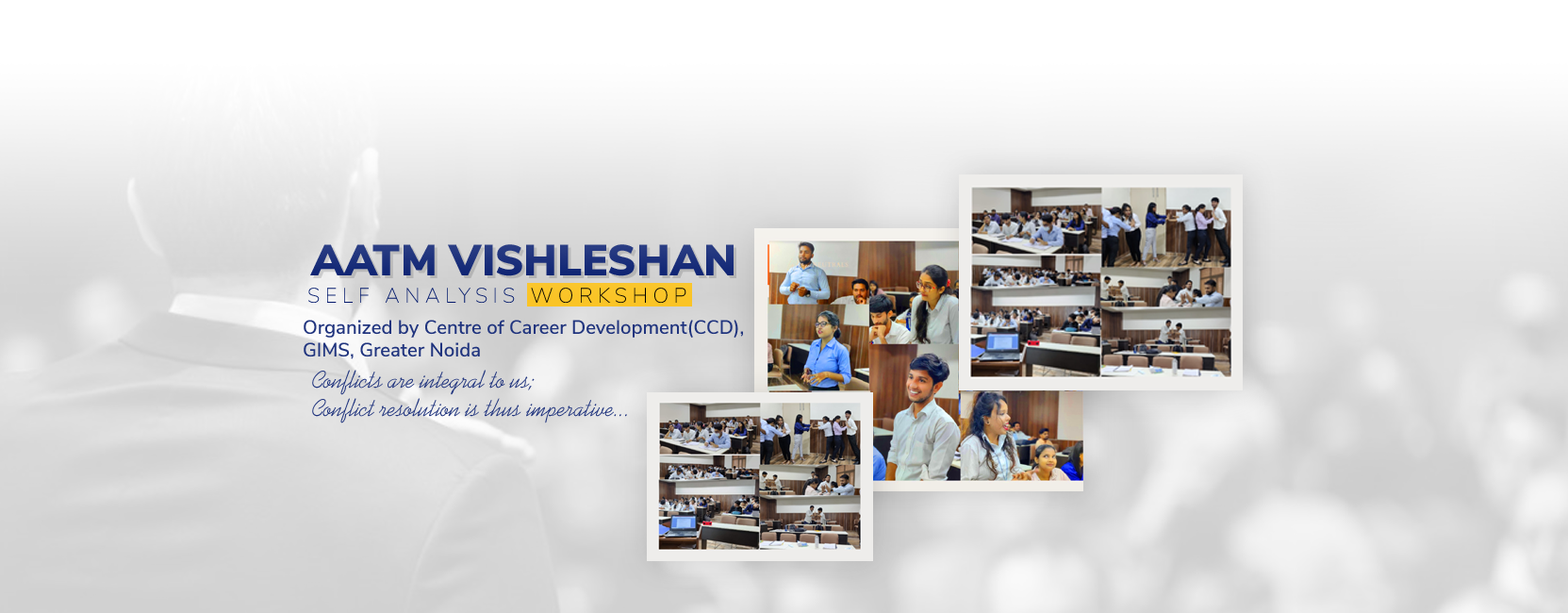
<style>
.page{position:relative;width:1568px;height:613px}
.page>*{position:absolute;margin:0}
.t1{font:43.4px "NunitoSans-Black";color:#1c307b;text-transform:uppercase}
.t2{font:20.9px "NunitoSans-ExtraLight";letter-spacing:0.24em;color:#00176b;text-transform:uppercase}
.t3{font:20.9px "NunitoSans-ExtraLight";letter-spacing:0.24em;color:#000000;text-transform:uppercase}
.t4{font:19.2px "NunitoSans-SemiBold";color:#20347e}
.t5{font:24.1px "KaufmannBT-Regular";color:#20347e}
</style>
<div class="page">
<p class="t1" style="left:310px;top:244px;width:424px;height:32px">Aatm Vishleshan</p>
<p class="t2" style="left:308px;top:288px;width:378px;height:16px">Self Analysis <span class="t3">workshop</span></p>
<p class="t4" style="left:304px;top:320px;width:439px;height:39px">Organized by Centre of Career Development(CCD), GIMS, Greater Noida</p>
<p class="t5" style="left:312px;top:370px;width:315px;height:53px">Conflicts are integral to us;<br>Conflict resolution is thus imperative...</p>
</div>
